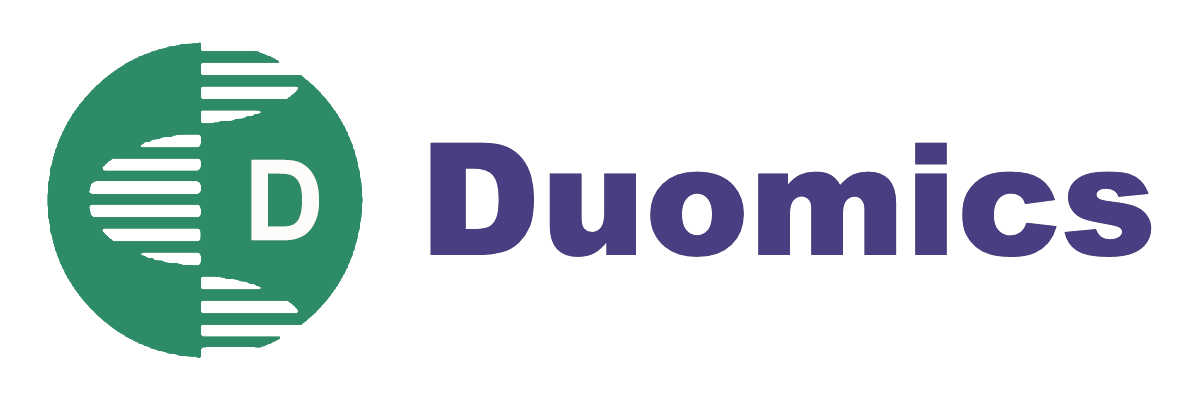
<style>
.page{position:relative;width:1200px;height:400px;background:#ffffff}
.page>*{position:absolute;margin:0}
.t1{font:156px "Arial-Black";color:#483e81}
</style>
<div class="page">
<p class="t1" style="left:430px;top:142px;width:722px;height:115px">Duomics</p>
</div>
